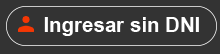
<style>
.page{position:relative;width:220px;height:54px;background:#333333}
.page>*{position:absolute;margin:0}
.t1{font:21.2px "ArialNarrow-Bold";color:#ffffff;scale:1.18 1}
</style>
<div class="page">
<p class="t1" style="left:44px;top:17px;width:155px;height:19px">Ingresar sin DNI</p>
</div>
